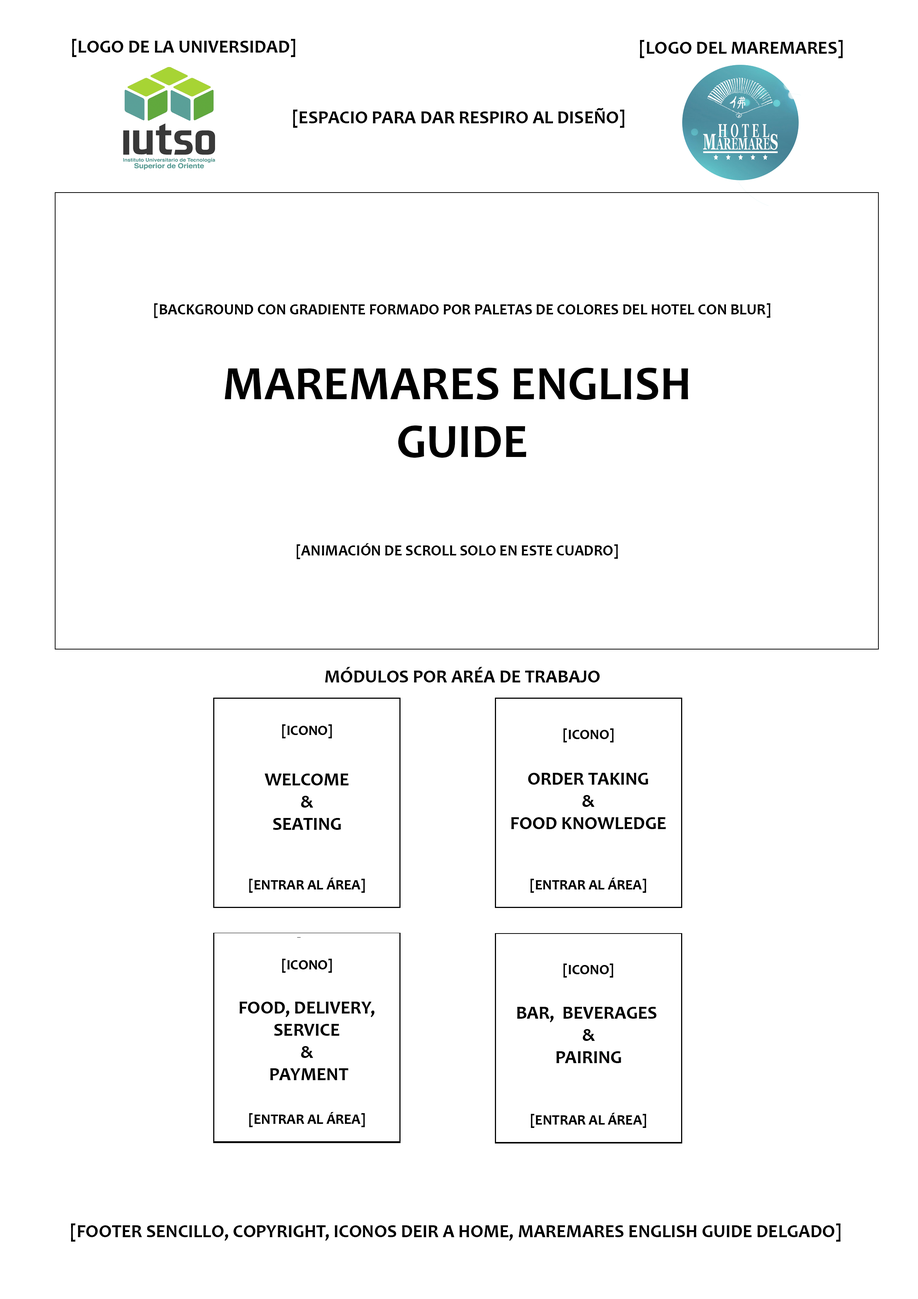
<style>
.page{position:relative;width:918px;height:1299px;background:#ffffff}
.page>*{position:absolute;margin:0}
.t1{font:18.5px "Candara-Bold";color:#000000}
.t2{font:15.2px "Candara-Bold";color:#000000}
.t3{font:48.2px "Candara-Bold";color:#000000}
</style>
<div class="page">
<p class="t1" style="left:72px;top:39px;width:223px;height:18px">[LOGO DE LA UNIVERSIDAD]</p>
<p class="t1" style="left:640px;top:40px;width:203px;height:18px">[LOGO DEL MAREMARES]</p>
<p class="t1" style="left:293px;top:108px;width:332px;height:20px">[ESPACIO PARA DAR RESPIRO AL DISEÑO]</p>
<p class="t2" style="left:154px;top:303px;width:616px;height:15px">[BACKGROUND CON GRADIENTE FORMADO POR PALETAS DE COLORES DEL HOTEL CON BLUR]</p>
<p class="t3" style="left:225px;top:368px;width:463px;height:90px;text-align:center">MAREMARES ENGLISH <br>GUIDE</p>
<p class="t2" style="left:297px;top:543px;width:321px;height:16px">[ANIMACIÓN DE SCROLL SOLO EN ESTE CUADRO]</p>
<p class="t1" style="left:325px;top:667px;width:275px;height:15px">MÓDULOS POR ARÉA DE TRABAJO</p>
<p class="t1" style="left:71px;top:1223px;width:770px;height:19px">[FOOTER SENCILLO, COPYRIGHT, ICONOS DEIR A HOME, MAREMARES ENGLISH GUIDE DELGADO]</p>
</div>
